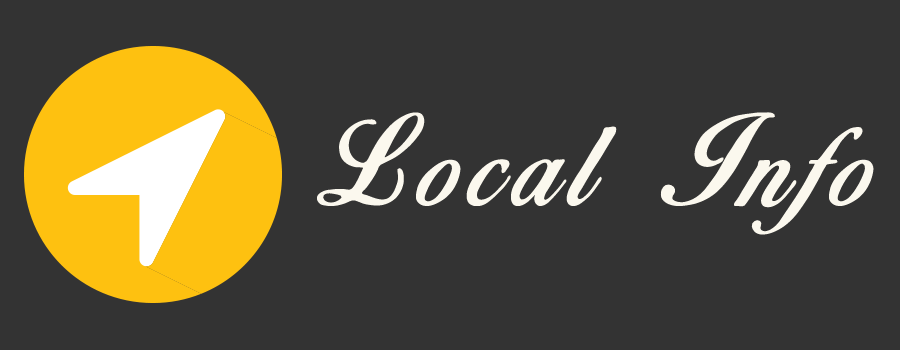
<style>
.page{position:relative;width:900px;height:350px;background:#333333}
.page>*{position:absolute;margin:0}
.t1{font:112px "BirdsofParadise";letter-spacing:0.1em;color:#fbf8ee}
</style>
<div class="page">
<p class="t1" style="left:317px;top:112px;width:557px;height:123px">Local Info</p>
</div>
